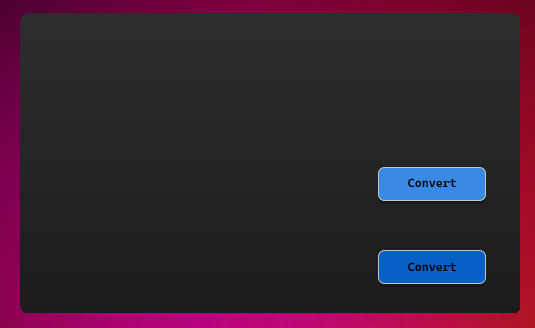
<style>
.page{position:relative;width:535px;height:328px}
.page>*{position:absolute;margin:0}
.t1{font:12px "CascadiaCodeRoman-SemiBold";color:#000000}
</style>
<div class="page">
<p class="t1" style="left:408px;top:178px;width:49px;height:10px">Convert</p>
<p class="t1" style="left:408px;top:262px;width:49px;height:10px">Convert</p>
</div>
